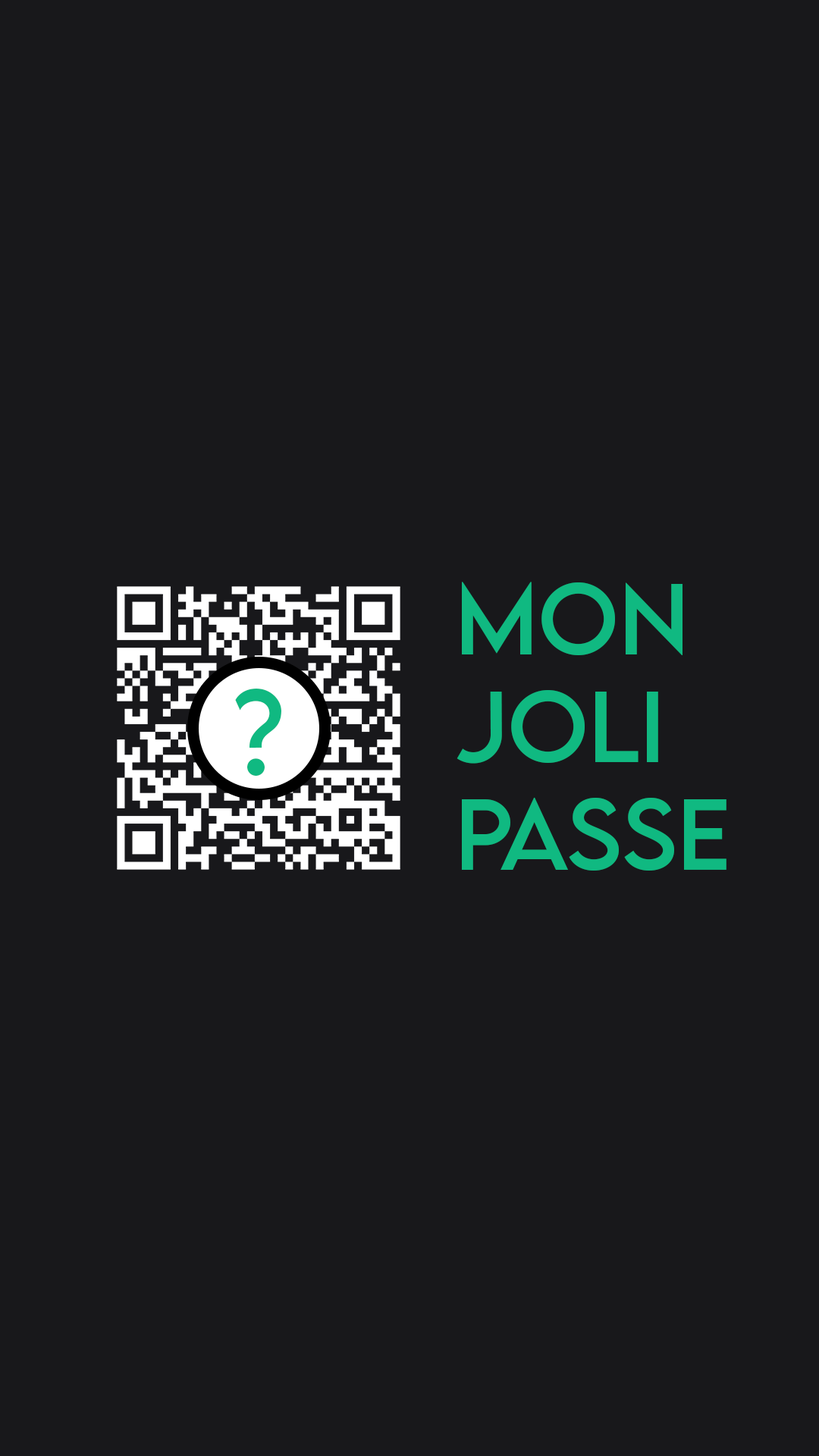
<style>
.page{position:relative;width:819px;height:1456px;background:#18181b}
.page>*{position:absolute;margin:0}
.t1{font:90px "LEMONMILK-Regular";color:#10b981}
.t2{font:104.9px "LEMONMILK-Regular";color:#10b981}
</style>
<div class="page">
<p class="t1" style="left:457px;top:582px;width:269px;height:289px">MON <br>JOLI  <br>PASSE</p>
<p class="t2" style="left:235px;top:689px;width:46px;height:87px">?</p>
</div>
